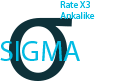
<style>
.page{position:relative;width:126px;height:81px;background:#ffffff}
.page>*{position:absolute;margin:0}
.t1{font:9.6px "MyriadPro-Regular";color:#01bae1}
.t2{font:125px "MyriadPro-Regular";color:#0e3139}
.t3{font:29.2px "MyriadPro-Regular";color:#02bbe3}
</style>
<div class="page">
<p class="t1" style="left:60px;top:1px;width:35px;height:18px">Rate X3<br>Ankalike</p>
<p class="t2" style="left:9px;top:17px;width:63px;height:64px">σ</p>
<p class="t3" style="left:0px;top:41px;width:80px;height:20px">SIGMA</p>
</div>
